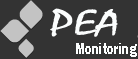
<style>
.page{position:relative;width:138px;height:59px;background:#333333}
.page>*{position:absolute;margin:0}
.t1{font:35.8px "Mistral";color:#fbfdfd;scale:1.49 1}
.t2{font:16.3px "FranklinGothic-Heavy";color:#fbfdfd;scale:0.73 1}
</style>
<div class="page">
<p class="t1" style="left:50px;top:8px;width:68px;height:29px">PEA</p>
<p class="t2" style="left:76px;top:43px;width:61px;height:14px">Monitoring</p>
</div>
